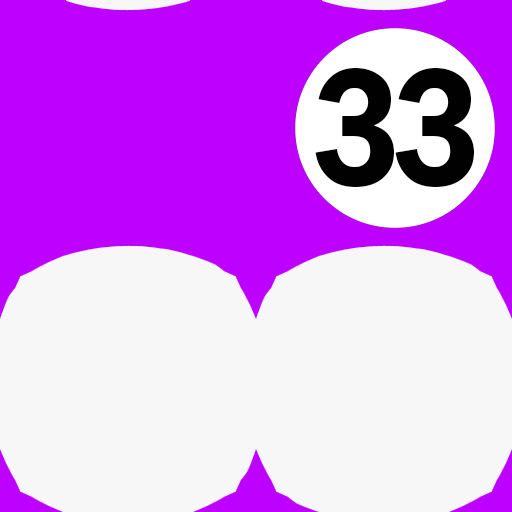
<style>
.page{position:relative;width:512px;height:512px;background:#f7f7f7}
.page>*{position:absolute;margin:0}
.t1{font:172.5px "FranklinGothic-Demi";letter-spacing:-0.05em;color:#010101;scale:0.87 1}
</style>
<div class="page">
<p class="t1" style="left:315px;top:68px;width:159px;height:119px">33</p>
</div>
